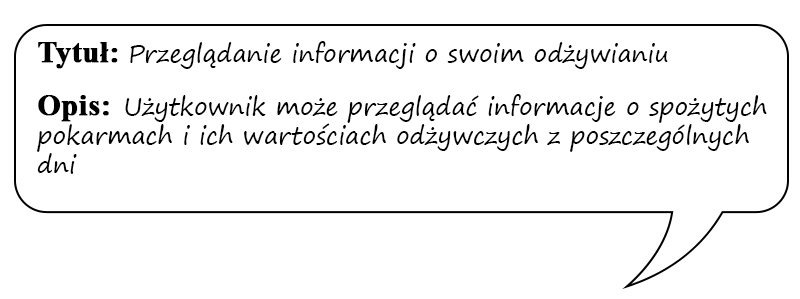
<style>
.page{position:relative;width:800px;height:299px;background:#ffffff}
.page>*{position:absolute;margin:0}
.t1{font:24px "SegoePrint";color:#000000}
.t2{font:30px "TimesNewRomanPS-BoldMT";color:#000000;font-weight:bold}
</style>
<div class="page">
<p class="t1" style="left:37px;top:41px;width:730px;height:133px"><span class="t2">Tytuł: </span>Przeglądanie informacji o swoim odżywianiu<br><br><span class="t2">Opis:  </span>Użytkownik może przeglądać informacje o spożytych pokarmach i ich wartościach odżywczych z poszczególnych dni</p>
</div>
